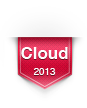
<style>
.page{position:relative;width:87px;height:108px;background:#ffffff}
.page>*{position:absolute;margin:0}
.t1{font:17px "Helvetica-Bold";color:#fefefe}
.t2{font:9.7px "Helvetica";color:#fefefe}
</style>
<div class="page">
<p class="t1" style="left:21px;top:47px;width:47px;height:28px;text-align:center">Cloud<br><br><span class="t2">2013</span></p>
</div>
